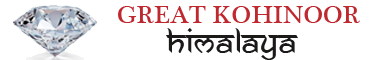
<style>
.page{position:relative;width:380px;height:60px;background:#ffffff}
.page>*{position:absolute;margin:0}
.t1{font:26.1px "PlantagenetCherokee";color:#bf282f}
.t2{font:34.4px "AnandaNamaste";color:#1b1a19}
</style>
<div class="page">
<p class="t1" style="left:118px;top:6px;width:242px;height:17px">GREAT KOHINOOR</p>
<p class="t2" style="left:166px;top:28px;width:132px;height:32px">himalaya</p>
</div>
